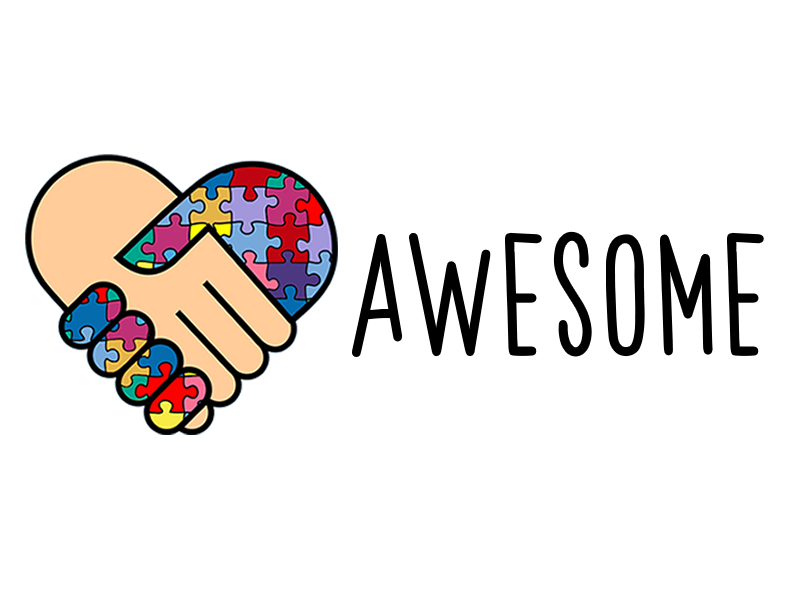
<style>
.page{position:relative;width:800px;height:600px;background:#ffffff}
.page>*{position:absolute;margin:0}
.t1{font:150px "SpringHoliday";letter-spacing:0.075em;color:#000000;text-transform:uppercase}
</style>
<div class="page">
<p class="t1" style="left:354px;top:233px;width:408px;height:122px">Awesome</p>
</div>
